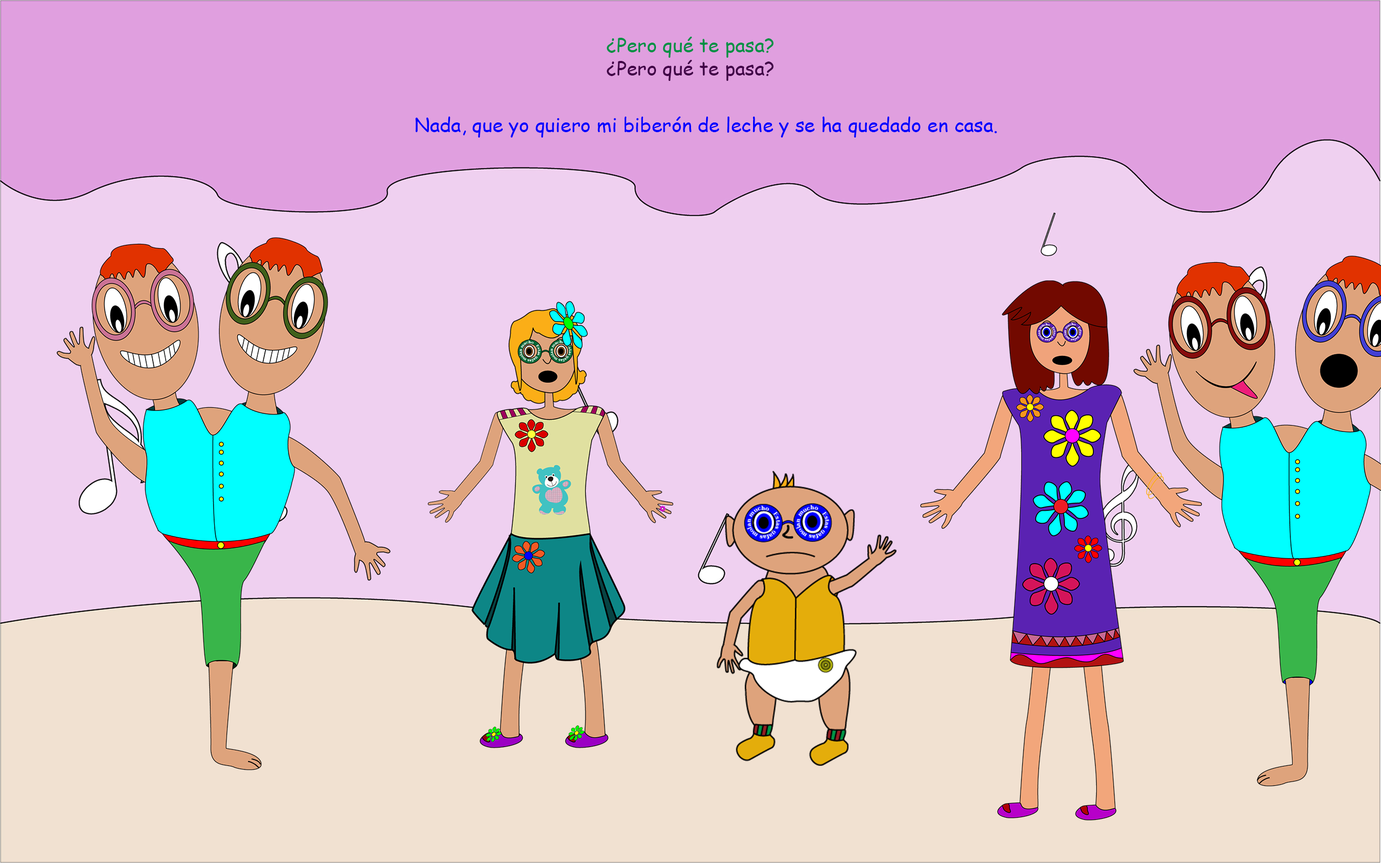
<style>
.page{position:relative;width:1381px;height:863px;background:#efd0f0}
.page>*{position:absolute;margin:0}
.t1{font:19.4px "ComicSansMS";color:#009045}
.t2{font:19.4px "ComicSansMS";color:#410047}
.t3{font:19.4px "ComicSansMS";color:#0000ff}
</style>
<div class="page">
<p class="t1" style="left:606px;top:37px;width:168px;height:44px">¿Pero qué te pasa?<br><span class="t2">¿Pero qué te pasa?</span></p>
<p class="t3" style="left:415px;top:117px;width:582px;height:21px">Nada, que yo quiero mi biberón de leche y se ha quedado en casa.</p>
</div>
